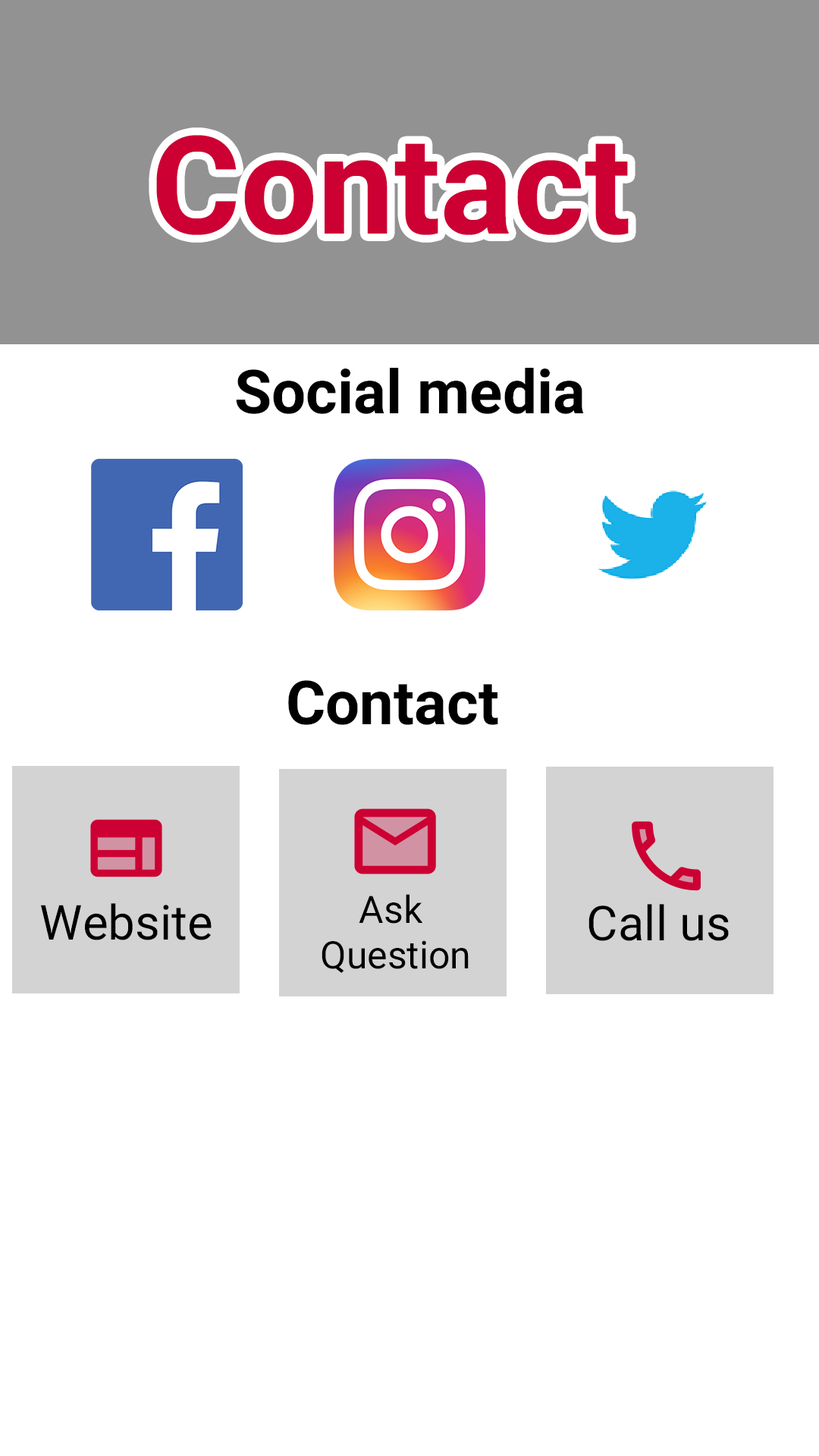
<style>
.page{position:relative;width:819px;height:1456px;background:#ffffff}
.page>*{position:absolute;margin:0}
.t1{font:136.5px "Roboto-Bold";color:#cc0033}
.t2{font:60.7px "Roboto-Bold";color:#000000}
.t3{font:48.2px "Roboto-Regular";color:#000000}
.t4{font:37.9px "Roboto-Regular";color:#000000}
</style>
<div class="page">
<p class="t1" style="left:156px;top:135px;width:473px;height:100px">Contact</p>
<p class="t2" style="left:236px;top:368px;width:348px;height:46px">Social media</p>
<p class="t2" style="left:288px;top:680px;width:210px;height:45px">Contact</p>
<p class="t3" style="left:41px;top:903px;width:171px;height:37px">Website</p>
<p class="t4" style="left:322px;top:894px;width:147px;height:79px;text-align:center">Ask <br>Question</p>
<p class="t3" style="left:588px;top:904px;width:141px;height:37px">Call us</p>
</div>
